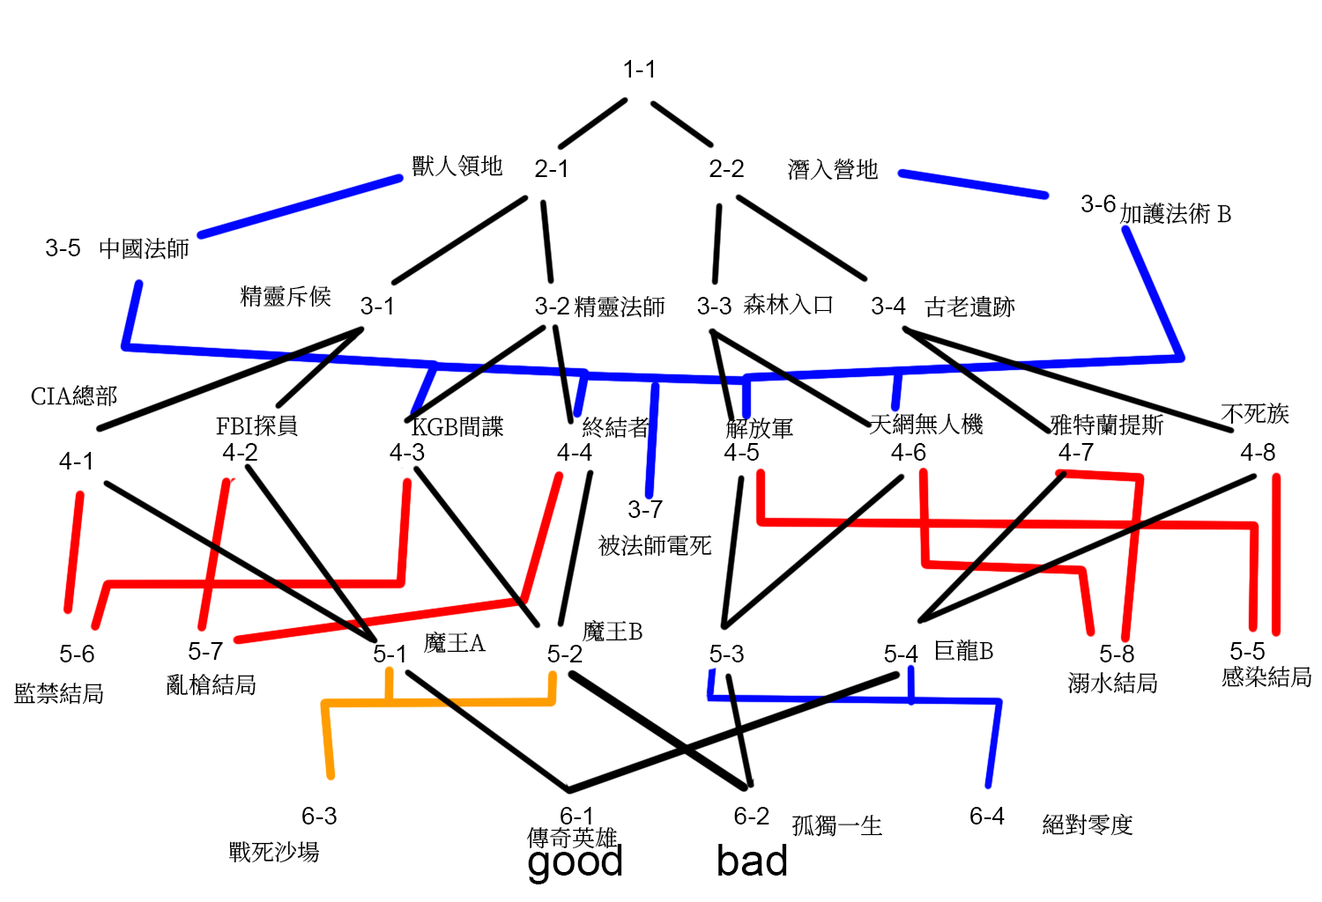
<style>
.page{position:relative;width:1322px;height:902px;background:#ffffff}
.page>*{position:absolute;margin:0}
.t1{font:24.9px "ArialMT";color:#000000}
.t2{font:22.9px "SweiSugarCJKsc-Regular";color:#000000}
.t3{font:44.1px "ArialMT";color:#000000}
</style>
<div class="page">
<p class="t1" style="left:624px;top:60px;width:29px;height:18px">1-1</p>
<p class="t2" style="left:411px;top:154px;width:92px;height:23px">獸人領地</p>
<p class="t1" style="left:535px;top:159px;width:31px;height:18px">2-1</p>
<p class="t1" style="left:709px;top:159px;width:35px;height:18px">2-2</p>
<p class="t2" style="left:788px;top:159px;width:90px;height:22px">潛入營地</p>
<p class="t1" style="left:1081px;top:195px;width:34px;height:17px">3-6</p>
<p class="t2" style="left:1119px;top:203px;width:112px;height:22px">加護法術 B</p>
<p class="t1" style="left:46px;top:239px;width:34px;height:17px">3-5</p>
<p class="t2" style="left:100px;top:238px;width:89px;height:22px">中國法師</p>
<p class="t2" style="left:240px;top:285px;width:91px;height:23px">精靈斥候</p>
<p class="t2" style="left:743px;top:293px;width:90px;height:22px">森林入口</p>
<p class="t1" style="left:360px;top:297px;width:32px;height:18px">3-1</p>
<p class="t1" style="left:535px;top:297px;width:34px;height:18px">3-2</p>
<p class="t2" style="left:574px;top:296px;width:90px;height:22px">精靈法師</p>
<p class="t1" style="left:697px;top:297px;width:34px;height:18px">3-3</p>
<p class="t1" style="left:871px;top:297px;width:35px;height:18px">3-4</p>
<p class="t2" style="left:924px;top:295px;width:91px;height:23px">古老遺跡</p>
<p class="t2" style="left:31px;top:385px;width:86px;height:22px">CIA總部</p>
<p class="t2" style="left:869px;top:413px;width:113px;height:22px">天網無人機</p>
<p class="t2" style="left:1220px;top:403px;width:69px;height:22px">不死族</p>
<p class="t2" style="left:216px;top:415px;width:82px;height:22px">FBI探員</p>
<p class="t2" style="left:411px;top:416px;width:93px;height:22px">KGB間諜</p>
<p class="t2" style="left:582px;top:417px;width:67px;height:22px">終結者</p>
<p class="t2" style="left:726px;top:418px;width:67px;height:22px">解放軍</p>
<p class="t2" style="left:1049px;top:414px;width:115px;height:22px">雅特蘭提斯</p>
<p class="t1" style="left:222px;top:443px;width:35px;height:18px">4-2</p>
<p class="t1" style="left:389px;top:443px;width:36px;height:18px">4-3</p>
<p class="t1" style="left:557px;top:443px;width:35px;height:18px">4-4</p>
<p class="t1" style="left:723px;top:443px;width:36px;height:18px">4-5</p>
<p class="t1" style="left:891px;top:443px;width:35px;height:18px">4-6</p>
<p class="t1" style="left:1058px;top:443px;width:35px;height:18px">4-7</p>
<p class="t1" style="left:1240px;top:443px;width:35px;height:18px">4-8</p>
<p class="t1" style="left:59px;top:452px;width:32px;height:18px">4-1</p>
<p class="t1" style="left:628px;top:500px;width:35px;height:18px">3-7</p>
<p class="t2" style="left:597px;top:535px;width:115px;height:22px">被法師電死</p>
<p class="t2" style="left:582px;top:619px;width:60px;height:23px">魔王B</p>
<p class="t2" style="left:424px;top:631px;width:62px;height:23px">魔王A</p>
<p class="t2" style="left:935px;top:640px;width:58px;height:22px">巨龍B</p>
<p class="t1" style="left:60px;top:645px;width:34px;height:18px">5-6</p>
<p class="t1" style="left:189px;top:642px;width:34px;height:18px">5-7</p>
<p class="t1" style="left:374px;top:645px;width:30px;height:18px">5-1</p>
<p class="t1" style="left:547px;top:645px;width:35px;height:18px">5-2</p>
<p class="t1" style="left:709px;top:645px;width:35px;height:18px">5-3</p>
<p class="t1" style="left:884px;top:645px;width:34px;height:18px">5-4</p>
<p class="t1" style="left:1100px;top:645px;width:34px;height:18px">5-8</p>
<p class="t1" style="left:1230px;top:642px;width:34px;height:18px">5-5</p>
<p class="t2" style="left:167px;top:673px;width:89px;height:23px">亂槍結局</p>
<p class="t2" style="left:1067px;top:672px;width:91px;height:22px">溺水結局</p>
<p class="t2" style="left:1221px;top:666px;width:91px;height:22px">感染結局</p>
<p class="t2" style="left:14px;top:682px;width:90px;height:23px">監禁結局</p>
<p class="t1" style="left:302px;top:807px;width:35px;height:18px">6-3</p>
<p class="t1" style="left:560px;top:807px;width:31px;height:18px">6-1</p>
<p class="t1" style="left:734px;top:807px;width:35px;height:18px">6-2</p>
<p class="t1" style="left:970px;top:807px;width:34px;height:18px">6-4</p>
<p class="t2" style="left:792px;top:815px;width:90px;height:22px">孤獨一生</p>
<p class="t2" style="left:1042px;top:813px;width:91px;height:23px">絕對零度</p>
<p class="t2" style="left:527px;top:827px;width:91px;height:22px">傳奇英雄</p>
<p class="t2" style="left:229px;top:841px;width:91px;height:22px">戰死沙場</p>
<p class="t3" style="left:528px;top:844px;width:94px;height:41px">good</p>
<p class="t3" style="left:718px;top:844px;width:69px;height:32px">bad</p>
</div>
